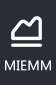
<style>
.page{position:relative;width:56px;height:85px;background:#2a2d33}
.page>*{position:absolute;margin:0}
.t1{font:14px "Ebrima";color:#ffffff}
</style>
<div class="page">
<p class="t1" style="left:5px;top:60px;width:46px;height:11px">MIEMM</p>
</div>
